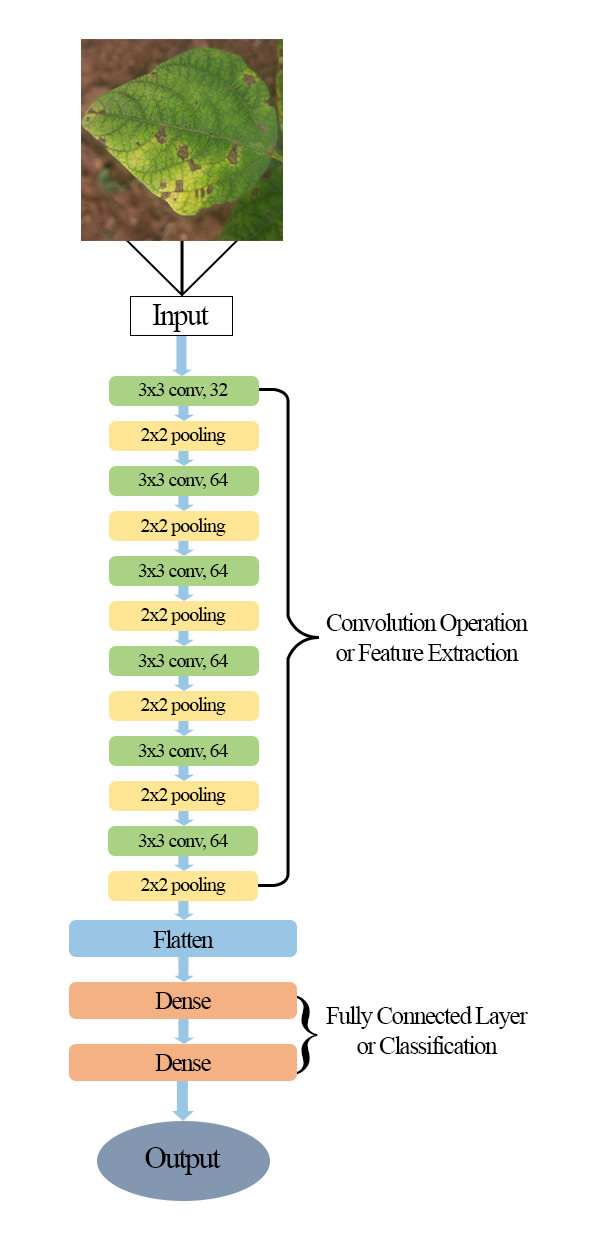
<style>
.page{position:relative;width:597px;height:1240px;background:#ffffff}
.page>*{position:absolute;margin:0}
.t1{font:30.8px "TimesNewRomanPSMT";letter-spacing:-0.06em;color:#000000}
.t2{font:20.2px "TimesNewRomanPSMT";letter-spacing:-0.06em;color:#000000}
.t3{font:25px "TimesNewRomanPSMT";letter-spacing:-0.06em;color:#000000}
.t4{font:88.8px "TimesNewRomanPSMT";letter-spacing:-0.06em;color:#000000}
</style>
<div class="page">
<p class="t1" style="left:152px;top:304px;width:57px;height:28px">Input</p>
<p class="t2" style="left:138px;top:383px;width:90px;height:16px">3x3 conv, 32</p>
<p class="t2" style="left:140px;top:427px;width:86px;height:18px">2x2 pooling</p>
<p class="t2" style="left:138px;top:473px;width:91px;height:16px">3x3 conv, 64</p>
<p class="t2" style="left:140px;top:518px;width:86px;height:18px">2x2 pooling</p>
<p class="t2" style="left:138px;top:564px;width:91px;height:16px">3x3 conv, 64</p>
<p class="t2" style="left:140px;top:607px;width:86px;height:18px">2x2 pooling</p>
<p class="t3" style="left:326px;top:613px;width:202px;height:48px;text-align:center">Convolution Operation<br>or Feature Extraction</p>
<p class="t2" style="left:138px;top:654px;width:91px;height:16px">3x3 conv, 64</p>
<p class="t2" style="left:140px;top:697px;width:86px;height:18px">2x2 pooling</p>
<p class="t2" style="left:138px;top:744px;width:91px;height:16px">3x3 conv, 64</p>
<p class="t2" style="left:140px;top:787px;width:86px;height:18px">2x2 pooling</p>
<p class="t2" style="left:138px;top:834px;width:91px;height:16px">3x3 conv, 64</p>
<p class="t2" style="left:140px;top:877px;width:86px;height:18px">2x2 pooling</p>
<p class="t3" style="left:153px;top:930px;width:61px;height:18px">Flatten</p>
<p class="t3" style="left:155px;top:992px;width:56px;height:17px">Dense</p>
<p class="t4" style="left:293px;top:995px;width:25px;height:80px">}</p>
<p class="t3" style="left:326px;top:1006px;width:202px;height:48px;text-align:center">Fully Connected Layer<br>or Classification</p>
<p class="t3" style="left:155px;top:1054px;width:56px;height:17px">Dense</p>
<p class="t1" style="left:145px;top:1147px;width:76px;height:28px">Output</p>
</div>
